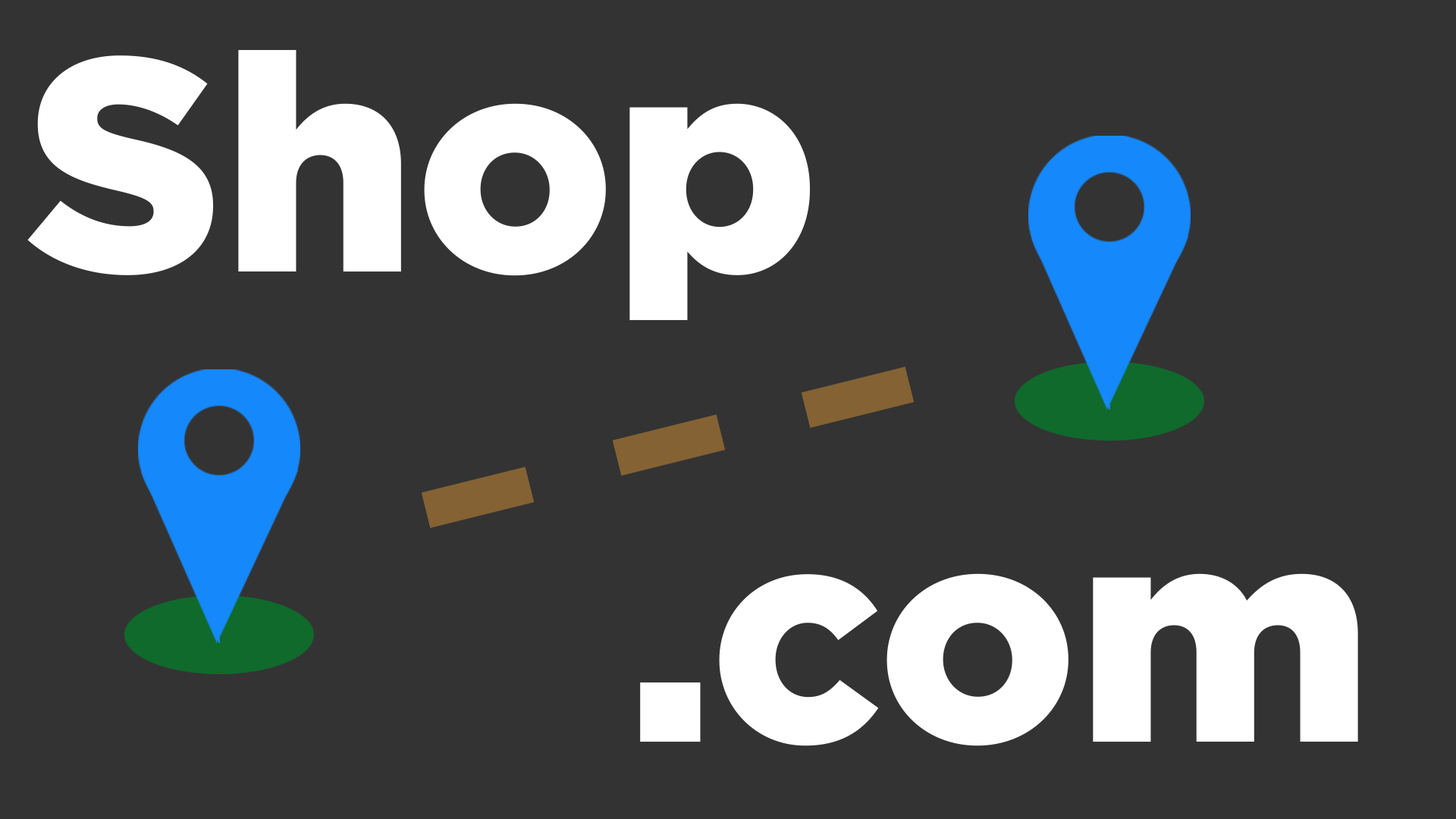
<style>
.page{position:relative;width:1456px;height:819px;background:#333333}
.page>*{position:absolute;margin:0}
.t1{font:303.3px "Gotham-Black";color:#ffffff}
</style>
<div class="page">
<p class="t1" style="left:27px;top:49px;width:784px;height:272px">Shop</p>
<p class="t1" style="left:640px;top:573px;width:718px;height:173px">.com</p>
</div>
